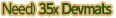
<style>
.page{position:relative;width:116px;height:18px;background:#ffffff}
.page>*{position:absolute;margin:0}
.t1{font:14px "UDShinGoPro-Bold";letter-spacing:-0.08em;color:#375309;scale:0.9 1}
.t2{font:14px "UDShinGoPro-DeBold";letter-spacing:-0.08em;color:#375309;scale:0.9 1}
.t3{font:12px "UDShinGoPro-DeBold";letter-spacing:-0.08em;color:#375309;scale:0.9 1}
.t4{font:12px "UDShinGoPro-Bold";letter-spacing:-0.08em;color:#375309;scale:0.9 1}
</style>
<div class="page">
<p class="t1" style="left:2px;top:2px;width:110px;height:13px"><span class="t2">Need</span><span class="t3">) </span>35<span class="t4">x</span> Devmats</p>
</div>
